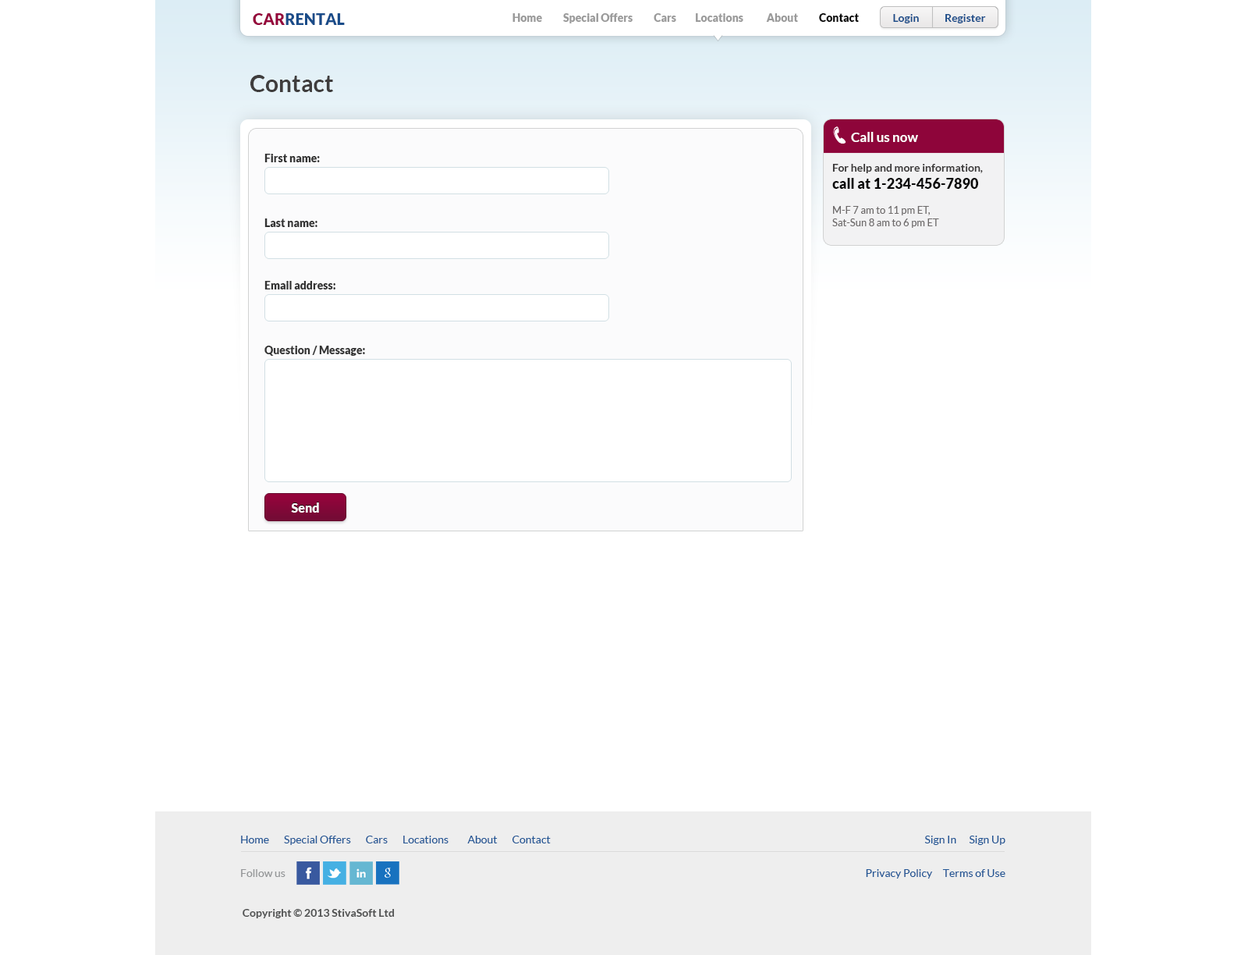
<style>
.page{position:relative;width:1248px;height:955px;background:#ffffff}
.page>*{position:absolute;margin:0}
.t1{font:15.6px "Lato-Black";color:#1a4c89;text-transform:uppercase}
.t2{font:15.6px "Lato-Black";color:#95033b;text-transform:uppercase}
.t3{font:10.9px "Lato-Black";color:#9a9a9a}
.t4{font:10.9px "Lato-Black";color:#0a0a0a}
.t5{font:11px "Lato-Bold";color:#1a4c89}
.t6{font:23.4px "Lato-Bold";color:#3f3d3d}
.t7{font:13.3px "Lato-Bold";color:#ffffff}
.t8{font:10.9px "Lato-Black";color:#333333}
.t9{font:10.1px "Lato-Regular";color:#6d6a6a}
.t10{font:10.9px "Lato-Bold";color:#393737}
.t11{font:14px "Lato-Black";color:#0a0a0a}
.t12{font:12.5px "Lato-Black";color:#ffffff}
.t13{font:10.9px "Lato-Regular";color:#225695}
.t14{font:10.9px "Lato-Regular";color:#949698}
.t15{font:10.9px "Lato-Bold";color:#4f5050}
</style>
<div class="page">
<p class="t1" style="left:253px;top:13px;width:92px;height:12px"><span class="t2">car</span>rental</p>
<p class="t3" style="left:513px;top:13px;width:346px;height:10px">Home          Special Offers          Cars         Locations           About          <span class="t4">Contact</span></p>
<p class="t5" style="left:893px;top:14px;width:93px;height:9px">Login            Register</p>
<p class="t6" style="left:250px;top:75px;width:83px;height:17px">Contact</p>
<p class="t7" style="left:851px;top:132px;width:67px;height:10px">Call us now</p>
<p class="t8" style="left:265px;top:154px;width:55px;height:8px">First name:</p>
<p class="t9" style="left:833px;top:164px;width:150px;height:64px"><span class="t10">For help and more information, <br></span><span class="t11">call at 1-234-456-7890<br><br></span>M-F 7 am to 11 pm ET,<br>Sat-Sun 8 am to 6 pm ET</p>
<p class="t8" style="left:265px;top:218px;width:53px;height:9px">Last name:</p>
<p class="t8" style="left:265px;top:281px;width:71px;height:8px">Email address:</p>
<p class="t8" style="left:265px;top:346px;width:100px;height:10px">Question / Message:</p>
<p class="t12" style="left:291px;top:503px;width:28px;height:10px">Send</p>
<p class="t13" style="left:241px;top:836px;width:310px;height:9px">Home       Special Offers       Cars       Locations         About       Contact</p>
<p class="t13" style="left:925px;top:836px;width:81px;height:9px">Sign In      Sign Up</p>
<p class="t14" style="left:241px;top:869px;width:45px;height:8px">Follow us</p>
<p class="t13" style="left:866px;top:869px;width:140px;height:10px">Privacy Policy     Terms of Use</p>
<p class="t15" style="left:243px;top:909px;width:152px;height:9px">Copyright © 2013 StivaSoft Ltd</p>
</div>
